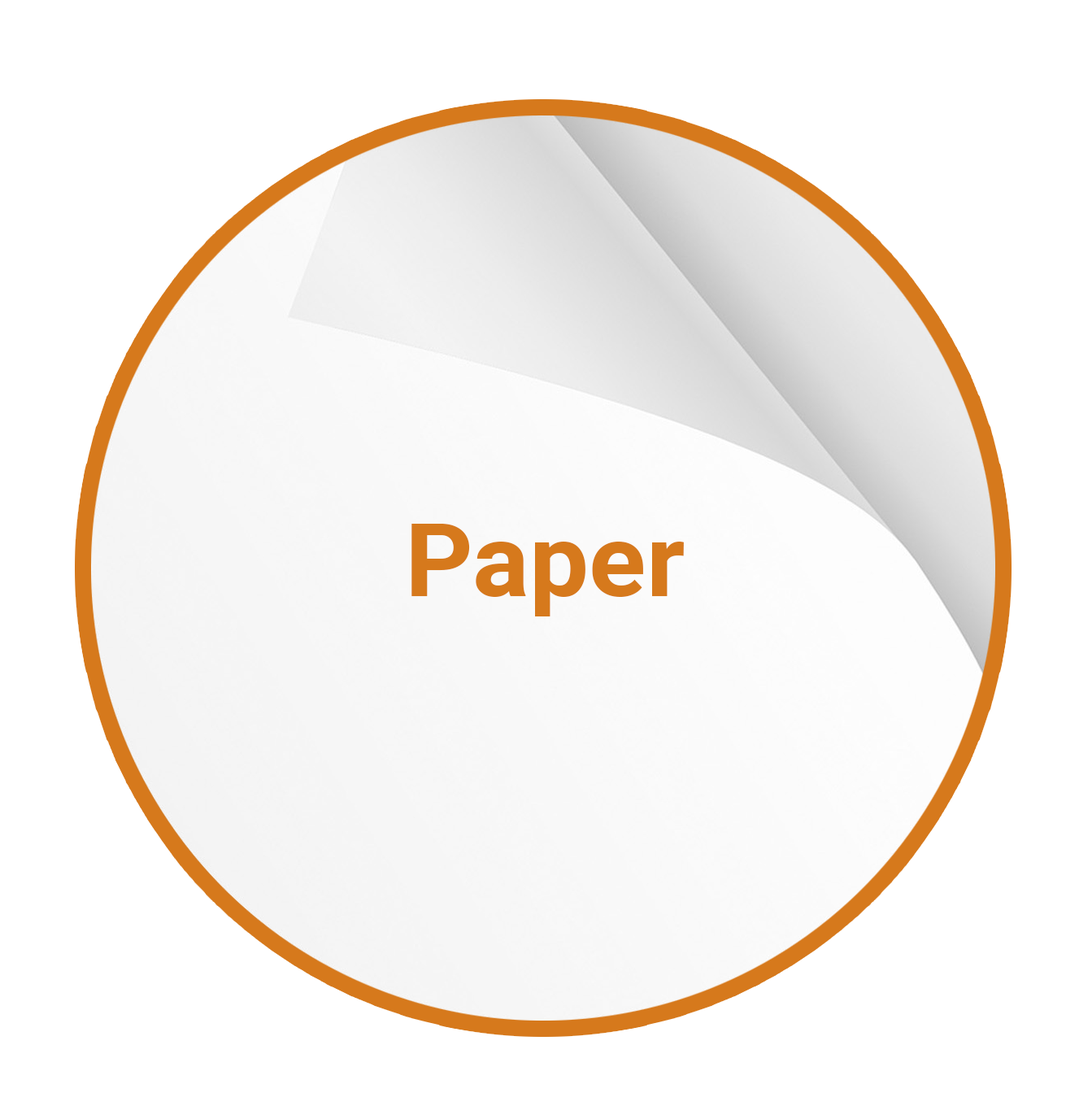
<style>
.page{position:relative;width:1066px;height:1119px;background:#ffffff}
.page>*{position:absolute;margin:0}
.t1{font:101.6px "Roboto-Bold";color:#d6791c;scale:1.04 1}
</style>
<div class="page">
<p class="t1" style="left:411px;top:524px;width:273px;height:92px">Paper</p>
</div>
